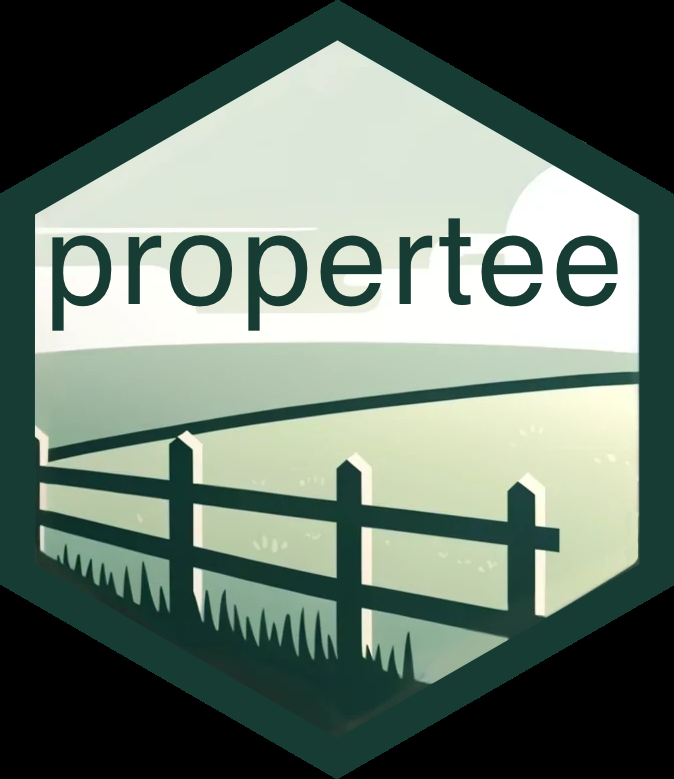
<style>
.page{position:relative;width:674px;height:779px;background:#000000}
.page>*{position:absolute;margin:0}
.t1{font:128px "Helvetica";letter-spacing:0.03em;color:#163c34}
</style>
<div class="page">
<p class="t1" style="left:52px;top:218px;width:566px;height:113px">propertee</p>
</div>
